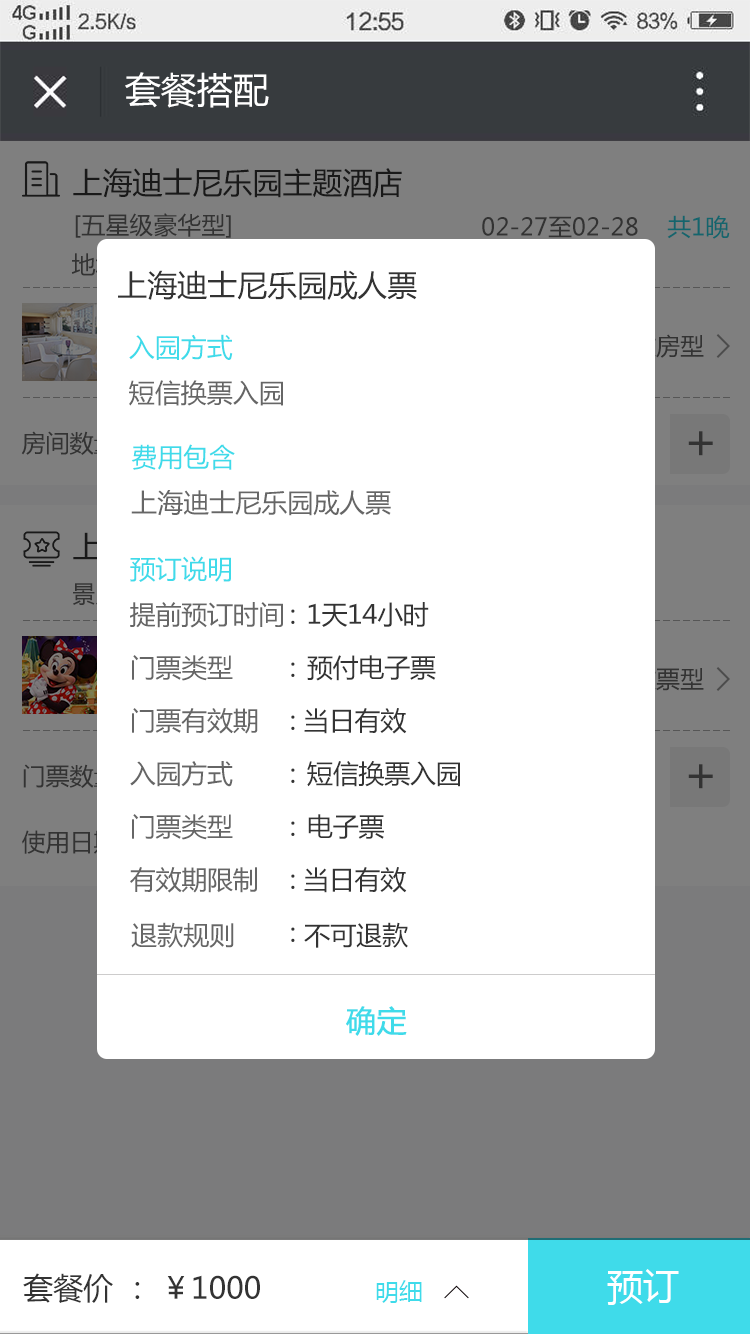
<style>
.page{position:relative;width:750px;height:1334px;background:#ffffff}
.page>*{position:absolute;margin:0}
.t1{font:36px "MicrosoftYaHei";color:#ffffff}
.t2{font:30px "MicrosoftYaHei";color:#191919}
.t3{font:24px "MicrosoftYaHei";color:#333333}
.t4{font:24px "MicrosoftYaHei"}
.t5{font:30px "MicrosoftYaHei";color:#333333}
.t6{font:26px "MicrosoftYaHei";color:#666666}
.t7{font:26px "MicrosoftYaHei";color:#3fdbea}
.t8{font:48px "MicrosoftYaHei";color:#333333}
.t9{font:26px/53px "MicrosoftYaHei";letter-spacing:-0.01em;color:#666666}
.t10{font:26px "MicrosoftYaHei";letter-spacing:-0.01em;color:#3fdbea}
.t11{font:26px/53px "MicrosoftYaHei";letter-spacing:-0.01em;color:#333333}
.t12{font:26px "MicrosoftYaHei";color:#333333}
.t13{font:30px "MicrosoftYaHei";color:#3fdbea;font-weight:bold}
.t14{font:24px "MicrosoftYaHei";color:#3fdbea}
</style>
<div class="page">
<p class="t1" style="left:125px;top:72px;width:144px;height:36px">套餐搭配</p>
<p class="t2" style="left:73px;top:168px;width:329px;height:30px">上海迪士尼乐园主题酒店</p>
<p class="t3" style="left:75px;top:213px;width:156px;height:25px">[五星级豪华型]</p>
<p class="t4" style="left:482px;top:215px;width:248px;height:24px">02-27至02-28    共1晚</p>
<p class="t5" style="left:118px;top:270px;width:299px;height:30px">上海迪士尼乐园成人票</p>
<p class="t6" style="left:129px;top:334px;width:154px;height:72px"><span class="t7">入园方式<br></span>短信换票入园</p>
<p class="t8" style="left:688px;top:431px;width:25px;height:25px">+</p>
<p class="t6" style="left:131px;top:444px;width:260px;height:72px"><span class="t7">费用包含<br></span>上海迪士尼乐园成人票</p>
<p class="t9" style="left:130px;top:556px;width:330px;height:337px"><span class="t10">预订说明  <br></span>提前预订时间   <span class="t11">1天14小时 <br></span>门票类型          <span class="t11">预付电子票 <br></span>门票有效期      <span class="t11">当日有效</span> <br>入园方式          <span class="t11">短信换票入园<br></span>门票类型          <span class="t11">电子票<br></span>有效期限制      <span class="t11">当日有效</span></p>
<p class="t11" style="left:291px;top:609px;width:4px;height:333px">:<br>:<br>:<br>:<br>:<br>:<br>:</p>
<p class="t8" style="left:688px;top:764px;width:25px;height:25px">+</p>
<p class="t6" style="left:131px;top:922px;width:277px;height:26px">退款规则         <span class="t12">不可退款</span></p>
<p class="t13" style="left:346px;top:1006px;width:61px;height:30px">确定</p>
<p class="t5" style="left:23px;top:1273px;width:237px;height:30px">套餐价 ： ￥1000</p>
<p class="t1" style="left:607px;top:1269px;width:72px;height:36px">预订</p>
<p class="t14" style="left:376px;top:1280px;width:46px;height:23px">明细</p>
</div>
